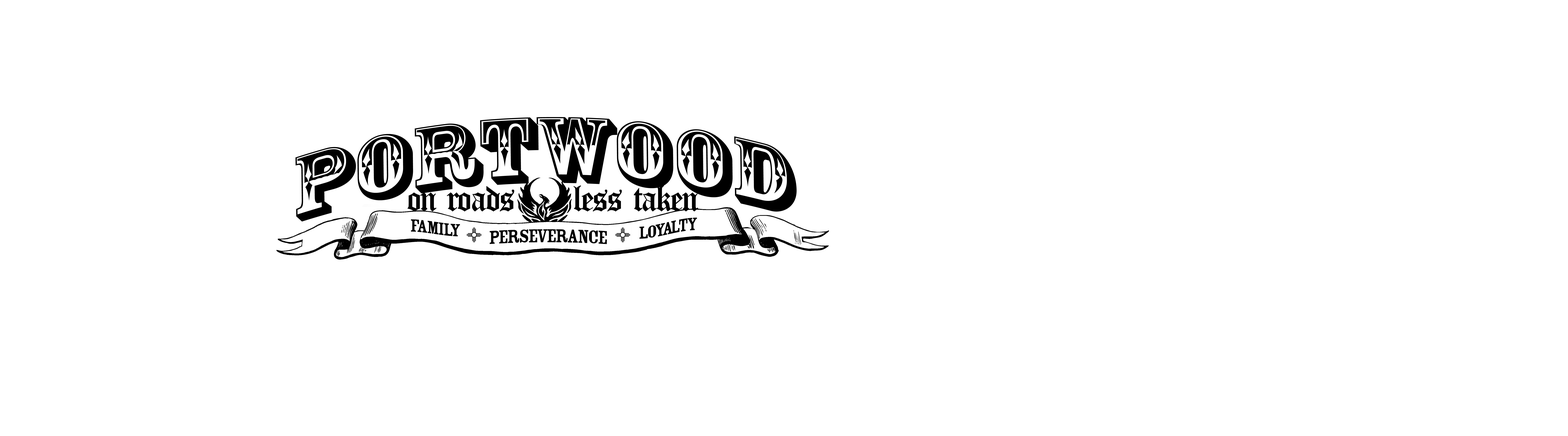
<style>
.page{position:relative;width:1568px;height:436px;background:#ffffff}
.page>*{position:absolute;margin:0}
.t1{font:88.4px "RosewoodStd-Regular";letter-spacing:-0.003em;color:#000000;scale:1.2 1}
.t2{font:26.4px "OldEnglishFive";letter-spacing:-0.08em;color:#000000}
.t3{font:19px "RosewoodFill";letter-spacing:-0.08em;color:#000000}
.t4{font:20.2px "RosewoodFill";letter-spacing:-0.08em;color:#000000}
</style>
<div class="page">
<p class="t1" style="left:295px;top:117px;width:502px;height:104px;rotate:-1deg">PORTWOOD</p>
<p class="t2" style="left:408px;top:185px;width:290px;height:26px">on roads     less taken</p>
<p class="t3" style="left:411px;top:219px;width:49px;height:17px">FAMILY</p>
<p class="t3" style="left:639px;top:217px;width:58px;height:22px">LOYALTY</p>
<p class="t4" style="left:490px;top:229px;width:117px;height:15px">perseverance</p>
</div>
